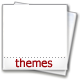
<style>
.page{position:relative;width:80px;height:80px;background:#ffffff}
.page>*{position:absolute;margin:0}
.t1{font:11px "Tahoma";color:#9d080d;font-weight:bold}
</style>
<div class="page">
<p class="t1" style="left:15px;top:58px;width:38px;height:10px">themes</p>
</div>
